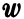
<style>
.page{position:relative;width:24px;height:19px;background:#ffffff}
.page>*{position:absolute;margin:0}
.t1{font:19.2px "ScriptMTBold";letter-spacing:0.12em;color:#000000;font-weight:bold}
</style>
<div class="page">
<p class="t1" style="left:2px;top:3px;width:19px;height:15px">W</p>
</div>
